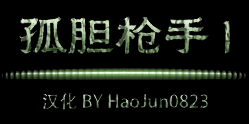
<style>
.page{position:relative;width:249px;height:124px;background:#000000}
.page>*{position:absolute;margin:0}
.t1{font:48px "???-Regular"}
.t2{font:18px "AdobeHeitiStd-Regular"}
</style>
<div class="page">
<p class="t1" style="left:19px;top:16px;width:212px;height:39px">孤胆枪手 I</p>
<p class="t2" style="left:42px;top:92px;width:167px;height:18px">汉化 BY HaoJun0823</p>
</div>
